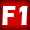
<style>
.page{position:relative;width:30px;height:30px;background:#ffffff}
.page>*{position:absolute;margin:0}
.t1{font:27.7px "ErasITC-Bold";color:#ffffff;scale:0.86 1}
</style>
<div class="page">
<p class="t1" style="left:2px;top:6px;width:26px;height:19px">F1</p>
</div>
